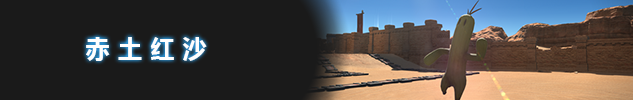
<style>
.page{position:relative;width:633px;height:100px;background:#1a1a1a}
.page>*{position:absolute;margin:0}
.t1{font:24px "MicrosoftYaHei-Bold";letter-spacing:0.35em;color:#fefefe}
</style>
<div class="page">
<p class="t1" style="left:86px;top:37px;width:121px;height:24px">赤土红沙</p>
</div>
